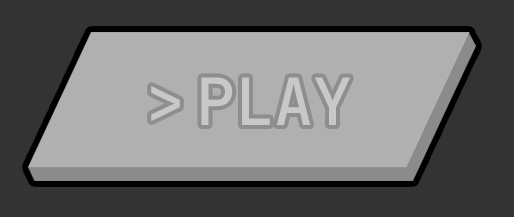
<style>
.page{position:relative;width:514px;height:217px;background:#333333}
.page>*{position:absolute;margin:0}
.t1{font:65px "JetBrainsMonoRoman-Medium";color:#c8c8c8}
</style>
<div class="page">
<p class="t1" style="left:151px;top:77px;width:199px;height:48px">PLAY</p>
</div>
